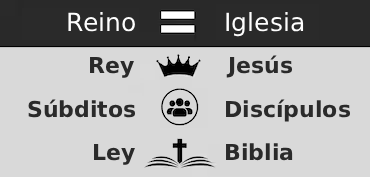
<style>
.page{position:relative;width:370px;height:177px;background:#d9d9d9}
.page>*{position:absolute;margin:0}
.t1{font:25px "DejaVuSans";color:#fefefe}
.t2{font:22px "DejaVuSans-Bold";color:#2a2a2a}
</style>
<div class="page">
<p class="t1" style="left:68px;top:12px;width:67px;height:20px">Reino</p>
<p class="t1" style="left:226px;top:12px;width:78px;height:25px">Iglesia</p>
<p class="t2" style="left:90px;top:56px;width:44px;height:22px">Rey</p>
<p class="t2" style="left:226px;top:55px;width:67px;height:23px">Jesús</p>
<p class="t2" style="left:28px;top:99px;width:108px;height:19px">Súbditos</p>
<p class="t2" style="left:226px;top:99px;width:125px;height:23px">Discípulos</p>
<p class="t2" style="left:94px;top:143px;width:41px;height:22px">Ley</p>
<p class="t2" style="left:226px;top:143px;width:67px;height:18px">Biblia</p>
</div>
